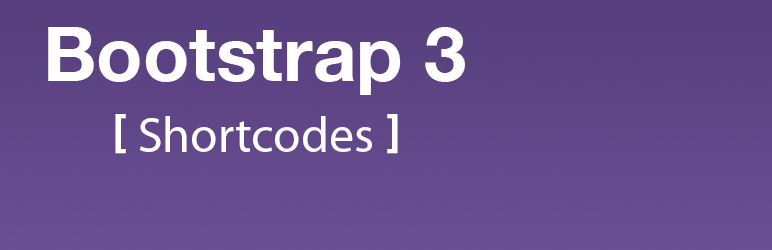
<style>
.page{position:relative;width:772px;height:250px}
.page>*{position:absolute;margin:0}
.t1{font:18.3px "HelveticaNeue-Bold";color:#ffffff}
.t2{font:12px "Myriad-Roman";color:#ffffff}
.t3{font:12px "Myriad-Bold";color:#ffffff}
</style>
<div class="page">
<p class="t1" style="left:48px;top:27px;width:417px;height:68px">Bootstrap 3</p>
<p class="t2" style="left:115px;top:114px;width:283px;height:40px"><span class="t3">[ </span>Shortcodes <span class="t3">]</span></p>
</div>
